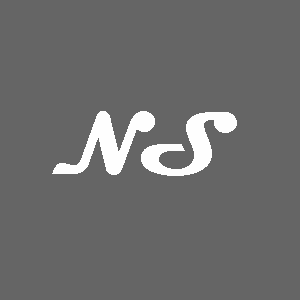
<style>
.page{position:relative;width:300px;height:300px;background:#656565}
.page>*{position:absolute;margin:0}
.t1{font:90px "Magneto-Bold";color:#fefefe}
</style>
<div class="page">
<p class="t1" style="left:52px;top:111px;width:185px;height:65px">NS</p>
</div>
